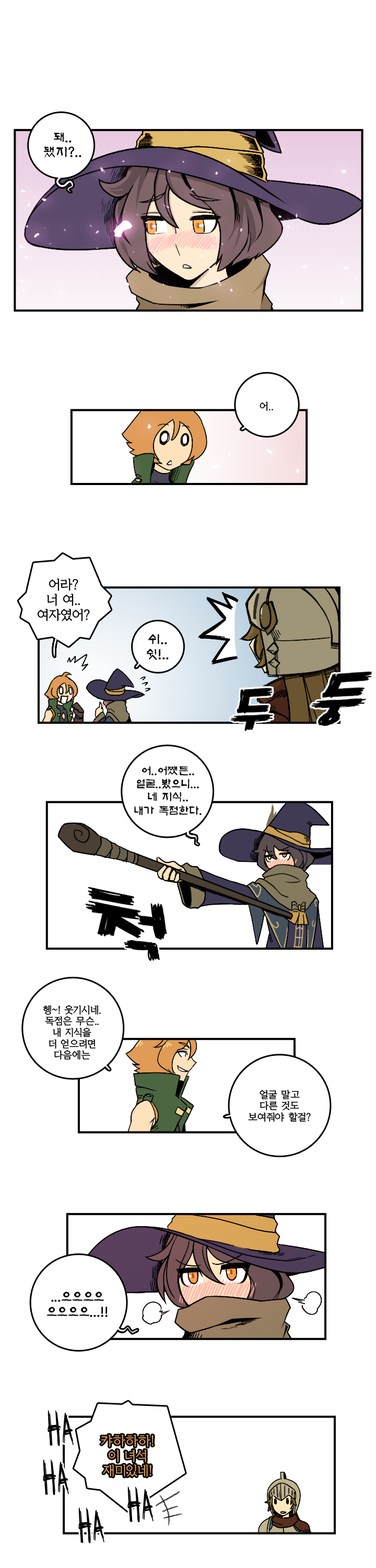
<style>
.page{position:relative;width:376px;height:1568px;background:#ffffff}
.page>*{position:absolute;margin:0}
.t1{font:12.5px "KoreanAS-R";color:#000000}
.t2{font:9.4px "KoreanYMJ-B";color:#000000}
.t3{font:12.5px "KoreanYMJ-B";color:#000000}
.t4{font:11px "KoreanAS-R";color:#000000}
.t5{font:12.5px "KoreanYMJ-B";color:#e09c57}
</style>
<div class="page">
<p class="t1" style="left:44px;top:132px;width:38px;height:25px;text-align:center">돼..<br>됐지?..</p>
<p class="t2" style="left:260px;top:401px;width:13px;height:10px">어..</p>
<p class="t3" style="left:37px;top:578px;width:53px;height:43px;text-align:center">어라?<br>너 여..<br>여자였어?</p>
<p class="t1" style="left:147px;top:634px;width:22px;height:26px;text-align:center">쉬..<br>쉿!..</p>
<p class="t4" style="left:134px;top:766px;width:68px;height:50px;text-align:center">어..어쨌든..<br>얼굴..봤으니...<br>네 지식..<br>내가 독점한다.</p>
<p class="t2" style="left:43px;top:1005px;width:58px;height:55px;text-align:center">헹~! 웃기시네.<br>독점은 무슨..<br>내 지식을<br>더 얻으려면<br>다음에는</p>
<p class="t2" style="left:248px;top:1090px;width:63px;height:32px;text-align:center">얼굴 말고<br>다른 것도<br>보여줘야 할걸?</p>
<p class="t1" style="left:47px;top:1292px;width:61px;height:25px;text-align:center">...으으으으<br>으으으으...!!</p>
<p class="t5" style="left:101px;top:1434px;width:53px;height:43px;text-align:center">캬하하하!<br>이 녀석<br>재미있네!</p>
</div>
